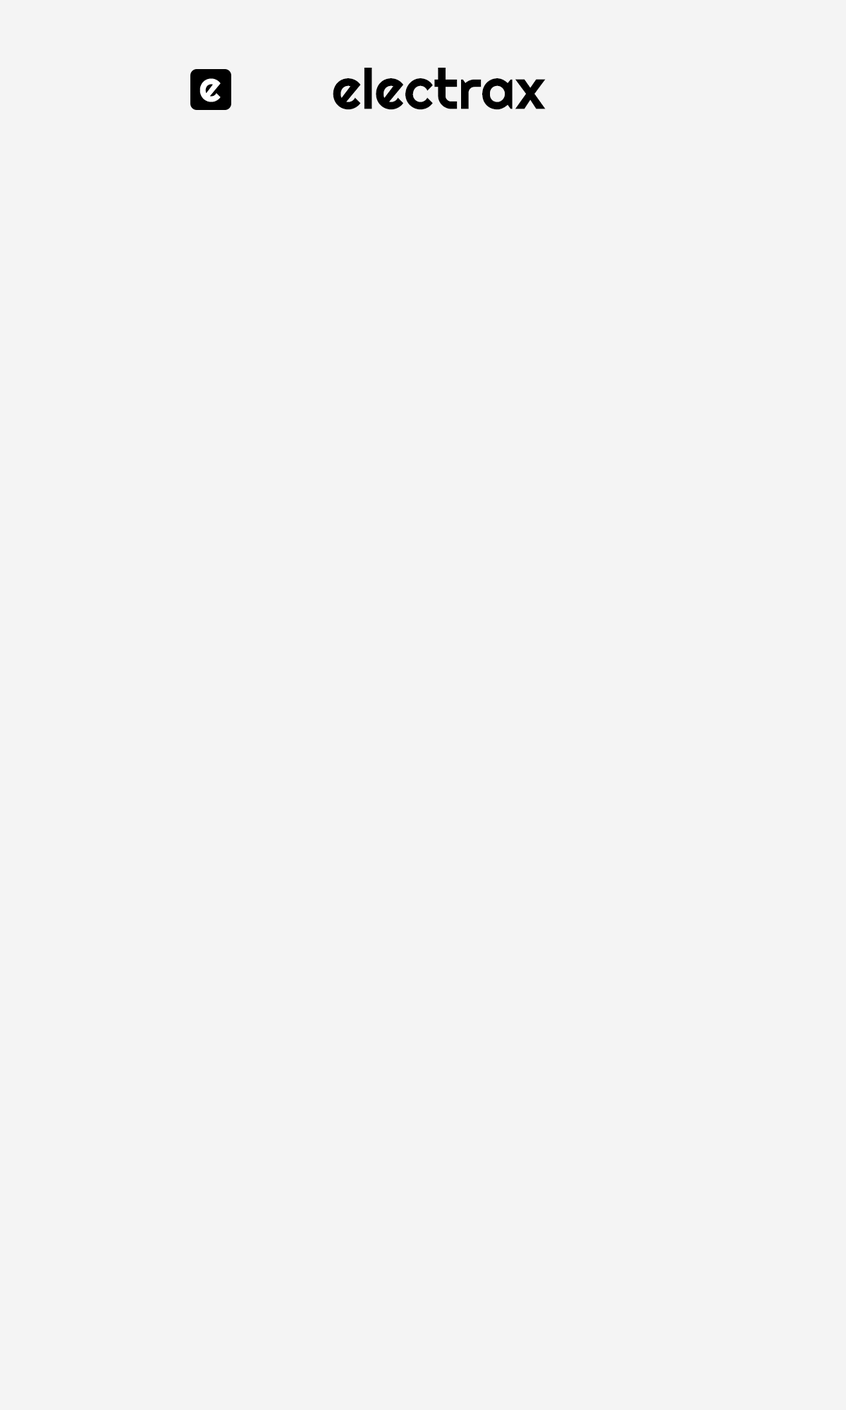
<style>
.page{position:relative;width:846px;height:1410px;background:#f4f4f4}
.page>*{position:absolute;margin:0}
.t1{font:56.4px "Righteous-Regular";color:#000000}
</style>
<div class="page">
<p class="t1" style="left:333px;top:68px;width:213px;height:42px">electrax</p>
</div>
